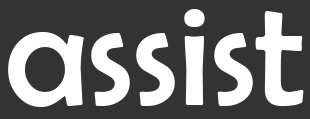
<style>
.page{position:relative;width:310px;height:119px;background:#333333}
.page>*{position:absolute;margin:0}
.t1{font:150px "BerlinSansFB-Reg";color:#ffffff}
</style>
<div class="page">
<p class="t1" style="left:8px;top:9px;width:296px;height:98px">assist</p>
</div>
